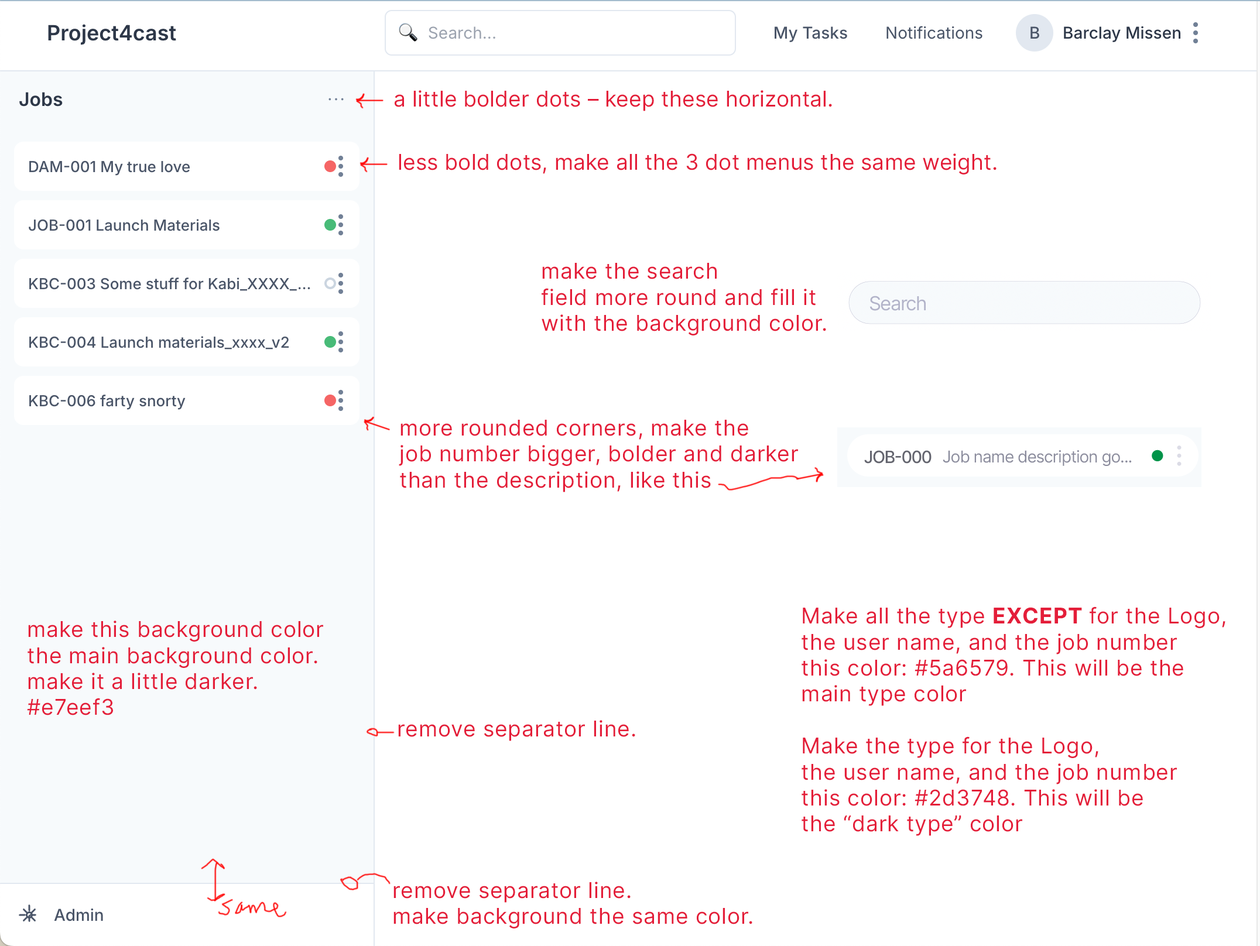
<style>
.page{position:relative;width:1260px;height:946px;background:#ffffff}
.page>*{position:absolute;margin:0}
.t1{font:21.7px "Inter-Regular";letter-spacing:0.005em;color:#e41d39}
.t2{font:21.7px "Inter-Regular";letter-spacing:0.025em;color:#e41d39}
.t3{font:21.7px "Inter-Bold";letter-spacing:0.025em;color:#e41d39;text-transform:uppercase}
</style>
<div class="page">
<p class="t1" style="left:395px;top:90px;width:437px;height:21px">a little bolder dots – keep these horizontal.</p>
<p class="t1" style="left:399px;top:153px;width:598px;height:21px">less bold dots, make all the 3 dot menus the same weight.</p>
<p class="t2" style="left:542px;top:263px;width:284px;height:73px">make the search <br>field more round and fill it <br>with the background color.</p>
<p class="t2" style="left:399px;top:420px;width:399px;height:72px">more rounded corners, make the <br>job number bigger, bolder and darker <br>than the description, like this</p>
<p class="t2" style="left:802px;top:607px;width:424px;height:229px">Make all the type <span class="t3">except </span>for the Logo, <br>the user name, and the job number <br>this color: #5a6579. This will be the <br>main type color<br><br>Make the type for the Logo, <br>the user name, and the job number <br>this color: #2d3748. This will be <br>the “dark type” color</p>
<p class="t2" style="left:27px;top:621px;width:296px;height:95px">make this background color <br>the main background color. <br>make it a little darker. <br>#e7eef3</p>
<p class="t2" style="left:398px;top:720px;width:237px;height:21px">remove separator line.</p>
<p class="t2" style="left:393px;top:882px;width:359px;height:47px">remove separator line. <br>make background the same color.</p>
</div>
